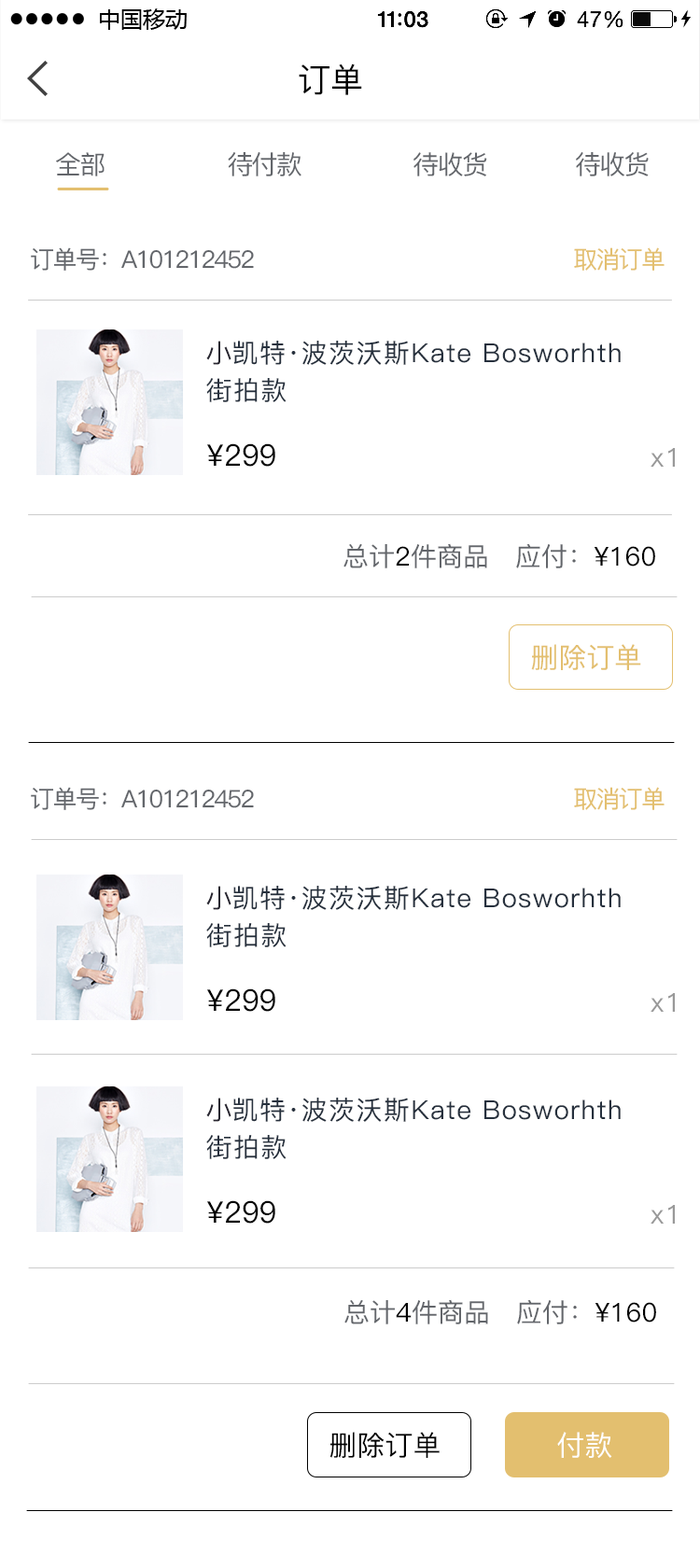
<style>
.page{position:relative;width:700px;height:1568px;background:#ffffff}
.page>*{position:absolute;margin:0}
.t1{font:33.3px "PingFang-SC-Medium";color:#000000}
.t2{font:25.8px "PingFang-SC-Medium";letter-spacing:-0.06em;color:#63666b}
.t3{font:26.1px "PingFang-SC-Medium";letter-spacing:-0.06em;color:#63666b}
.t4{font:24.3px "PingFang-SC-Medium";letter-spacing:-0.06em;color:#63666b}
.t5{font:24.3px "PingFang-SC-Medium";letter-spacing:-0.06em;color:#e3bf6f}
.t6{font:26.1px/37.3px "PingFang-SC-Medium";letter-spacing:0.05em;color:#26303d}
.t7{font:26.1px/37.3px "PingFang-SC-Medium";color:#272530}
.t8{font:29.9px "PingFang-SC-Medium";color:#000000}
.t9{font:26.1px "PingFang-SC-Medium";letter-spacing:0.05em;color:#999999}
.t10{font:26.1px "PingFang-SC-Medium";color:#63666b}
.t11{font:26.1px "PingFang-SC-Medium";color:#000000}
.t12{font:28px "PingFang-SC-Medium";color:#e3bf6f}
.t13{font:28px "PingFang-SC-Medium";color:#000000}
.t14{font:28px "PingFang-SC-Medium";color:#ffffff}
</style>
<div class="page">
<p class="t1" style="left:299px;top:63px;width:63px;height:32px">订单</p>
<p class="t2" style="left:56px;top:152px;width:49px;height:24px">全部</p>
<p class="t3" style="left:228px;top:152px;width:73px;height:24px">待付款</p>
<p class="t2" style="left:413px;top:152px;width:74px;height:24px">待收货</p>
<p class="t3" style="left:576px;top:152px;width:73px;height:24px">待收货</p>
<p class="t4" style="left:31px;top:247px;width:223px;height:24px">订单号：A101212452</p>
<p class="t5" style="left:574px;top:247px;width:91px;height:24px">取消订单</p>
<p class="t6" style="left:206px;top:341px;width:415px;height:61px"><span class="t7">小</span>凯特·波茨沃斯Kate Bosworhth<br>街拍款</p>
<p class="t8" style="left:207px;top:443px;width:68px;height:24px">¥299</p>
<p class="t9" style="left:651px;top:448px;width:24px;height:19px">x1</p>
<p class="t10" style="left:343px;top:543px;width:312px;height:25px">总计<span class="t11">2</span>件商品   应付：<span class="t11">¥160</span></p>
<p class="t12" style="left:531px;top:644px;width:110px;height:26px">删除订单</p>
<p class="t4" style="left:31px;top:787px;width:223px;height:23px">订单号：A101212452</p>
<p class="t5" style="left:574px;top:787px;width:91px;height:23px">取消订单</p>
<p class="t6" style="left:206px;top:886px;width:415px;height:61px"><span class="t7">小</span>凯特·波茨沃斯Kate Bosworhth<br>街拍款</p>
<p class="t8" style="left:207px;top:988px;width:68px;height:24px">¥299</p>
<p class="t9" style="left:651px;top:993px;width:24px;height:19px">x1</p>
<p class="t6" style="left:206px;top:1098px;width:415px;height:61px"><span class="t7">小</span>凯特·波茨沃斯Kate Bosworhth<br>街拍款</p>
<p class="t8" style="left:207px;top:1200px;width:68px;height:24px">¥299</p>
<p class="t9" style="left:651px;top:1205px;width:24px;height:19px">x1</p>
<p class="t10" style="left:344px;top:1299px;width:312px;height:25px">总计<span class="t11">4</span>件商品   应付：<span class="t11">¥160</span></p>
<p class="t13" style="left:329px;top:1432px;width:111px;height:26px">删除订单</p>
<p class="t14" style="left:557px;top:1432px;width:55px;height:26px">付款</p>
</div>
